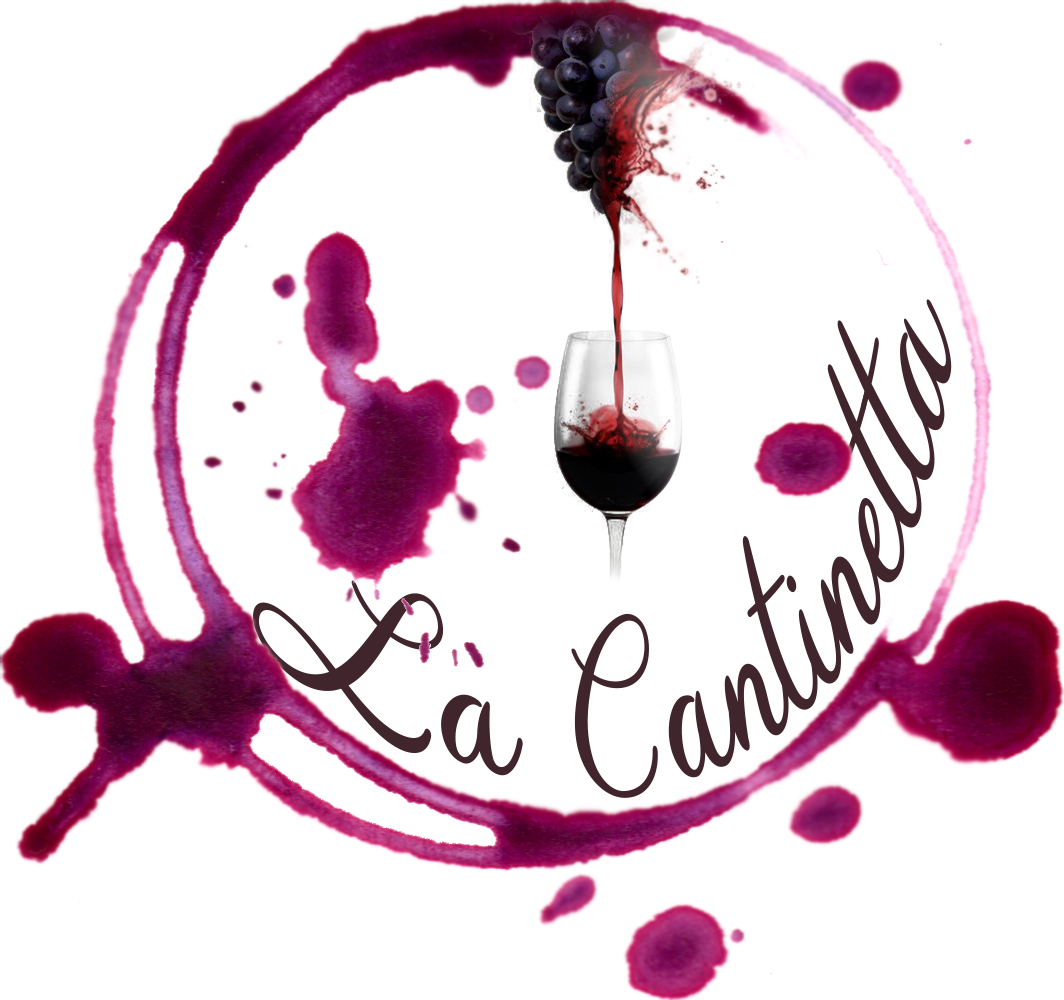
<style>
.page{position:relative;width:1064px;height:1000px;background:#ffffff}
.page>*{position:absolute;margin:0}
.t1{font:14.5px "WineDate-Regular";color:#40262c;scale:0.5 1}
</style>
<div class="page">
<p class="t1" style="left:252px;top:299px;width:700px;height:499px;rotate:-24deg">La Cantinetta</p>
</div>
